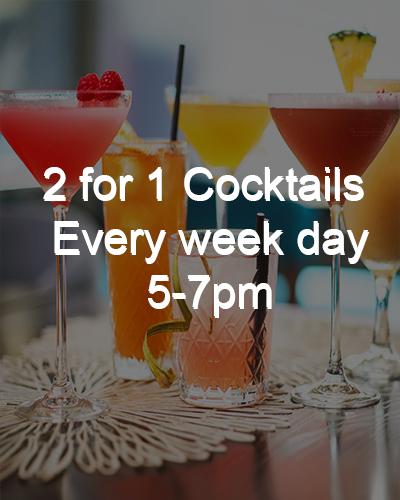
<style>
.page{position:relative;width:400px;height:500px}
.page>*{position:absolute;margin:0}
.t1{font:45px "ArialMT";color:#ffffff}
</style>
<div class="page">
<p class="t1" style="left:43px;top:167px;width:326px;height:149px;text-align:center">2 for 1 Cocktails <br>Every week day<br>5-7pm</p>
<p class="t1" style="left:44px;top:169px;width:326px;height:149px;text-align:center">2 for 1 Cocktails <br>Every week day<br>5-7pm</p>
</div>
